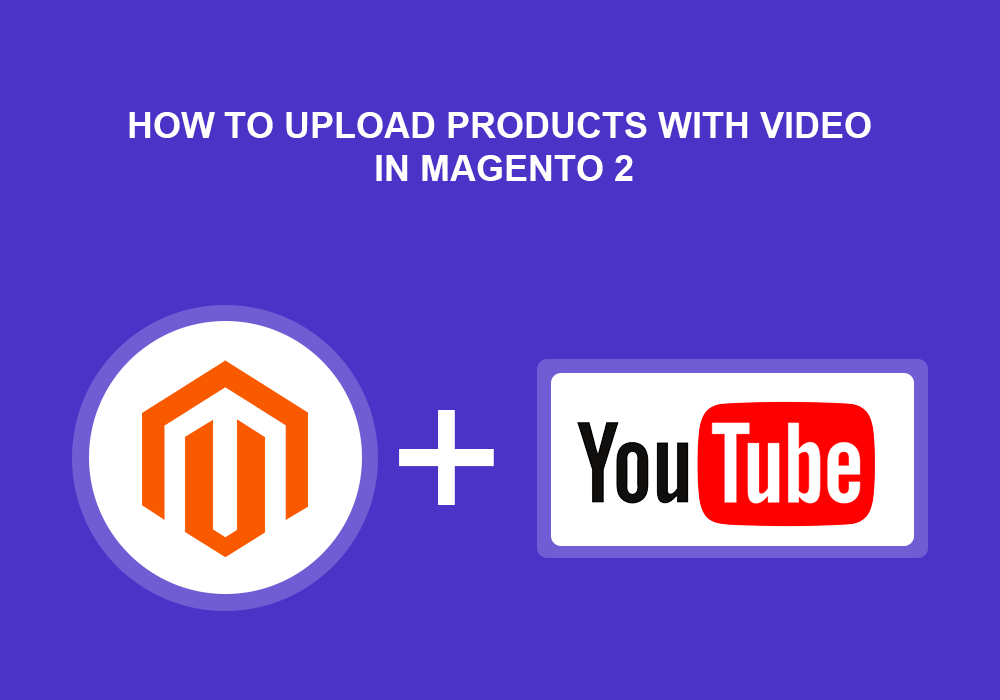
<style>
.page{position:relative;width:1000px;height:700px;background:#4c33c8}
.page>*{position:absolute;margin:0}
.t1{font:36px "Arial-BoldMT";color:#ffffff;text-transform:uppercase}
.t2{font:200px "ArialMT";color:#ffffff;text-transform:uppercase}
</style>
<div class="page">
<p class="t1" style="left:129px;top:112px;width:742px;height:69px;text-align:center">How to upload products with video <br>in magento 2</p>
<p class="t2" style="left:399px;top:410px;width:95px;height:95px">+</p>
</div>
